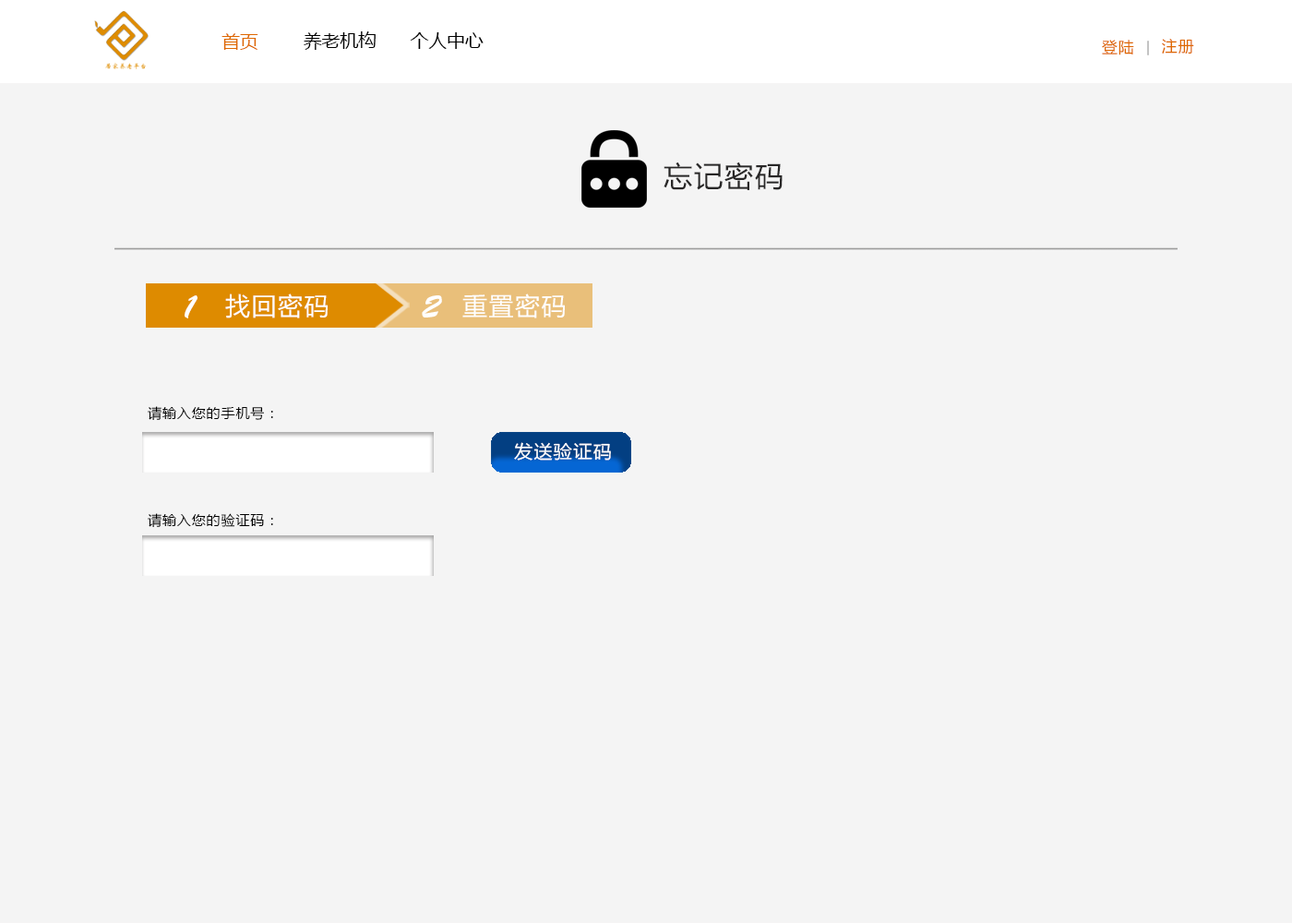
<style>
.page{position:relative;width:1292px;height:923px;background:#f4f4f4}
.page>*{position:absolute;margin:0}
.t1{font:18px "MicrosoftYaHei";color:#de6800}
.t2{font:18px "MicrosoftYaHei";color:#000000}
.t3{font:15.5px "MicrosoftYaHei";letter-spacing:0.06em;color:#de6800}
.t4{font:28.9px "MicrosoftYaHei";letter-spacing:0.06em;color:#282727}
.t5{font:24.9px "MicrosoftYaHei";letter-spacing:0.06em;color:#ffffff}
.t6{font:33.8px "BrushScriptStd";letter-spacing:0.06em;color:#ffffff}
.t7{font:13.8px "MicrosoftYaHei";letter-spacing:0.06em;color:#000000}
.t8{font:18px "MicrosoftYaHei";letter-spacing:0.06em;color:#ffffff;scale:1.03 1}
</style>
<div class="page">
<p class="t1" style="left:221px;top:33px;width:37px;height:17px">首页</p>
<p class="t2" style="left:304px;top:31px;width:72px;height:19px">养老机构</p>
<p class="t2" style="left:410px;top:32px;width:74px;height:17px">个人中心</p>
<p class="t3" style="left:1102px;top:40px;width:32px;height:15px">登陆</p>
<p class="t3" style="left:1162px;top:39px;width:32px;height:15px">注册</p>
<p class="t4" style="left:664px;top:162px;width:119px;height:28px">忘记密码</p>
<p class="t5" style="left:225px;top:293px;width:103px;height:25px">找回密码</p>
<p class="t5" style="left:462px;top:293px;width:103px;height:25px">重置密码</p>
<p class="t6" style="left:185px;top:295px;width:12px;height:23px">1</p>
<p class="t6" style="left:422px;top:295px;width:20px;height:22px">2</p>
<p class="t7" style="left:148px;top:406px;width:125px;height:14px">请输入您的手机号：</p>
<p class="t8" style="left:514px;top:442px;width:97px;height:19px">发送验证码</p>
<p class="t7" style="left:148px;top:513px;width:125px;height:14px">请输入您的验证码：</p>
</div>
